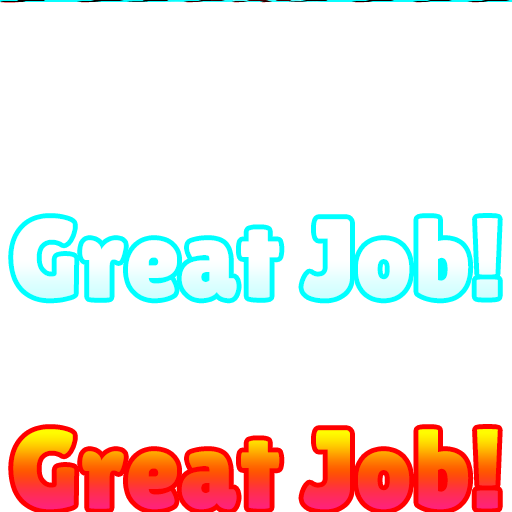
<style>
.page{position:relative;width:512px;height:512px;background:#ffffff}
.page>*{position:absolute;margin:0}
.t1{font:111px "LilitaOne";letter-spacing:0.01em}
</style>
<div class="page">
<p class="t1" style="left:13px;top:216px;width:485px;height:81px">Great Job!</p>
</div>
